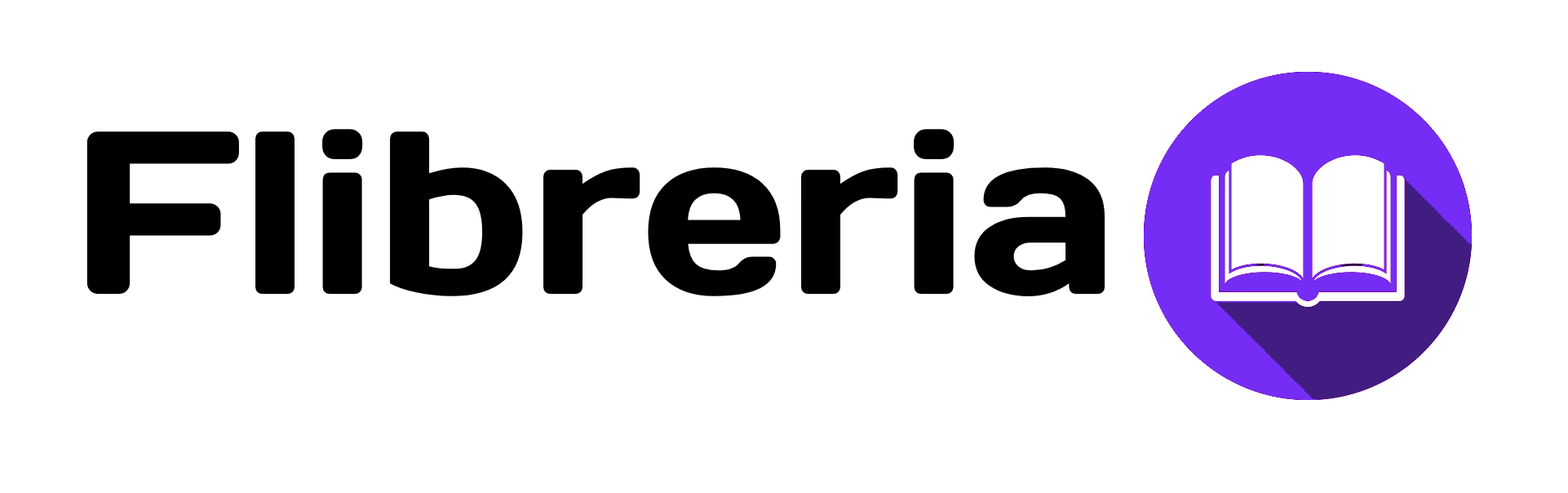
<style>
.page{position:relative;width:1568px;height:493px;background:#ffffff}
.page>*{position:absolute;margin:0}
.t1{font:231.7px "DaysOne-Regular";color:#000000}
</style>
<div class="page">
<p class="t1" style="left:86px;top:129px;width:1019px;height:167px">Flibreria</p>
</div>
